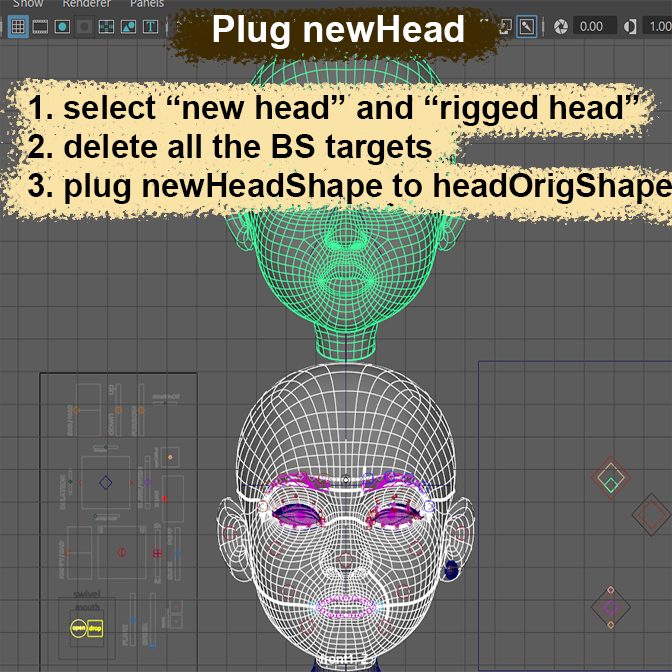
<style>
.page{position:relative;width:672px;height:672px;background:#5c5c5c}
.page>*{position:absolute;margin:0}
.t1{font:37.3px "Arial-BoldMT";color:#ffffff}
.t2{font:32.7px "Arial-BoldMT";color:#000000}
</style>
<div class="page">
<p class="t1" style="left:213px;top:15px;width:251px;height:34px">Plug newHead</p>
<p class="t2" style="left:28px;top:95px;width:645px;height:109px">1. select “new head” and “rigged head”<br>2. delete all the BS targets<br>3. plug newHeadShape to headOrigShape</p>
</div>
